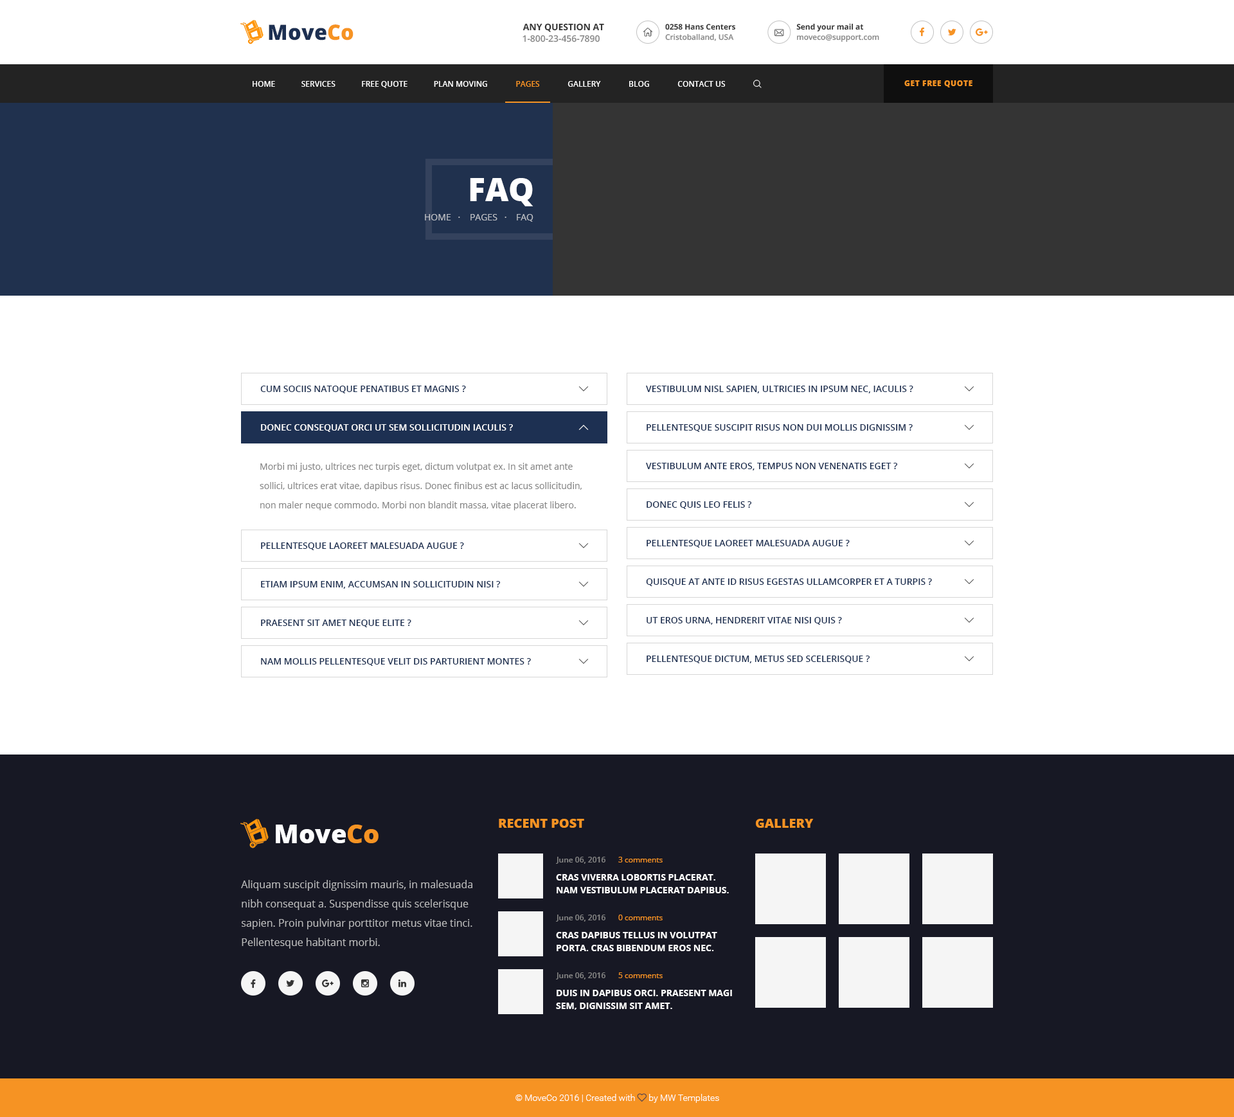
<style>
.page{position:relative;width:1234px;height:1117px;background:#ffffff}
.page>*{position:absolute;margin:0}
.t1{font:21.2px "OpenSans-Extrabold";color:#1d3052}
.t2{font:21.2px "OpenSans-Extrabold";color:#f69323}
.t3{font:9px "OpenSans-Bold";color:#343434;text-transform:uppercase}
.t4{font:7.7px "OpenSans-Bold";color:#343434}
.t5{font:9px "OpenSans-Semibold";color:#868686}
.t6{font:7.7px "OpenSans-Semibold";color:#868686}
.t7{font:7.7px "OpenSans-Extrabold";letter-spacing:0.05em;color:#f69323;text-transform:uppercase}
.t8{font:32.1px "OpenSans-Extrabold";color:#ffffff;text-transform:uppercase}
.t9{font:9px "OpenSans";color:#bcbfc5;text-transform:uppercase}
.t10{font:9px "OpenSans-Semibold";color:#1d3052;text-transform:uppercase}
.t11{font:9px "OpenSans-Semibold";color:#fefeff;text-transform:uppercase}
.t12{font:9px/19.3px "OpenSans";color:#868686}
.t13{font:12.9px "OpenSans-Extrabold";color:#f69323;text-transform:uppercase}
.t14{font:25.7px "OpenSans-Extrabold";color:#fefeff}
.t15{font:25.7px "OpenSans-Extrabold";color:#f69323}
.t16{font:7.7px "OpenSans";color:#f69323}
.t17{font:10.3px/19.3px "OpenSans";color:#bbbbbc}
.t18{font:9px/12.9px "OpenSans-Bold";color:#ffffff;text-transform:uppercase}
</style>
<div class="page">
<p class="t1" style="left:269px;top:24px;width:85px;height:16px">Move<span class="t2">Co</span></p>
<p class="t3" style="left:523px;top:23px;width:81px;height:9px">Any Question at</p>
<p class="t4" style="left:665px;top:24px;width:70px;height:6px">0258 Hans Centers</p>
<p class="t4" style="left:797px;top:23px;width:67px;height:9px">Send your mail at</p>
<p class="t5" style="left:523px;top:35px;width:77px;height:7px">1-800-23-456-7890</p>
<p class="t6" style="left:665px;top:33px;width:69px;height:8px">Cristoballand, USA</p>
<p class="t6" style="left:797px;top:34px;width:82px;height:8px">moveco@support.com</p>
<p class="t7" style="left:905px;top:80px;width:68px;height:7px">Get Free Quote</p>
<p class="t8" style="left:470px;top:178px;width:64px;height:28px">FAQ</p>
<p class="t9" style="left:425px;top:214px;width:109px;height:8px">home   ·    pages   ·    FAQ</p>
<p class="t10" style="left:260px;top:386px;width:206px;height:7px">Cum sociis natoque penatibus et magnis ?</p>
<p class="t10" style="left:646px;top:386px;width:268px;height:7px">Vestibulum nisl sapien, ultricies in ipsum nec, iaculis ?</p>
<p class="t11" style="left:261px;top:424px;width:252px;height:8px">Donec consequat orci ut sem sollicitudin iaculis ?</p>
<p class="t10" style="left:647px;top:424px;width:266px;height:8px">Pellentesque suscipit risus non dui mollis dignissim ?</p>
<p class="t12" style="left:260px;top:463px;width:322px;height:47px">Morbi mi justo, ultrices nec turpis eget, dictum volutpat ex. In sit amet ante sollici, ultrices erat vitae, dapibus risus. Donec finibus est ac lacus sollicitudin, non maler neque commodo. Morbi non blandit massa, vitae placerat libero.</p>
<p class="t10" style="left:646px;top:463px;width:252px;height:8px">Vestibulum ante eros, tempus non venenatis eget ?</p>
<p class="t10" style="left:647px;top:501px;width:105px;height:8px">Donec quis leo felis ?</p>
<p class="t10" style="left:261px;top:543px;width:203px;height:7px">Pellentesque laoreet malesuada augue ?</p>
<p class="t10" style="left:647px;top:540px;width:203px;height:8px">Pellentesque laoreet malesuada augue ?</p>
<p class="t10" style="left:261px;top:581px;width:240px;height:8px">Etiam ipsum enim, accumsan in sollicitudin nisi ?</p>
<p class="t10" style="left:646px;top:579px;width:286px;height:7px">Quisque at ante id risus egestas ullamcorper et a turpis ?</p>
<p class="t10" style="left:647px;top:617px;width:195px;height:8px">Ut eros urna, hendrerit vitae nisi quis ?</p>
<p class="t10" style="left:261px;top:620px;width:150px;height:7px">Praesent sit amet neque elite ?</p>
<p class="t10" style="left:261px;top:658px;width:270px;height:8px">Nam mollis pellentesque velit dis parturient montes ?</p>
<p class="t10" style="left:647px;top:656px;width:223px;height:7px">Pellentesque dictum, metus sed scelerisque ?</p>
<p class="t13" style="left:499px;top:819px;width:85px;height:9px">recent post</p>
<p class="t13" style="left:756px;top:819px;width:58px;height:9px">Gallery</p>
<p class="t14" style="left:276px;top:825px;width:103px;height:18px">Move<span class="t15">Co</span></p>
<p class="t6" style="left:556px;top:857px;width:50px;height:7px">June 06, 2016</p>
<p class="t16" style="left:618px;top:857px;width:45px;height:6px">3 comments</p>
<p class="t17" style="left:241px;top:880px;width:232px;height:69px">Aliquam suscipit dignissim mauris, in malesuada nibh consequat a. Suspendisse quis scelerisque sapien. Proin pulvinar porttitor metus vitae tinci. Pellentesque habitant morbi.</p>
<p class="t18" style="left:556px;top:874px;width:173px;height:20px">Cras viverra lobortis placerat. Nam vestibulum placerat dapibus.</p>
<p class="t6" style="left:556px;top:915px;width:50px;height:7px">June 06, 2016</p>
<p class="t16" style="left:618px;top:915px;width:45px;height:6px">0 comments</p>
<p class="t18" style="left:556px;top:932px;width:161px;height:19px">Cras dapibus tellus in volutpat porta. Cras bibendum eros nec.</p>
<p class="t6" style="left:556px;top:973px;width:50px;height:7px">June 06, 2016</p>
<p class="t16" style="left:618px;top:973px;width:45px;height:5px">5 comments</p>
<p class="t18" style="left:556px;top:990px;width:176px;height:20px">Duis in dapibus orci. Praesent magi sem, dignissim sit amet.</p>
</div>
